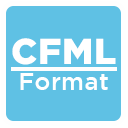
<style>
.page{position:relative;width:128px;height:128px;background:#5fc1e4}
.page>*{position:absolute;margin:0}
.t1{font:36px "Gotham-Black";letter-spacing:0.02em;color:#ffffff}
.t2{font:24px "Gotham-Medium";letter-spacing:0.02em;color:#ffffff}
</style>
<div class="page">
<p class="t1" style="left:12px;top:38px;width:104px;height:27px">CFML</p>
<p class="t2" style="left:20px;top:73px;width:88px;height:17px">Format</p>
</div>
